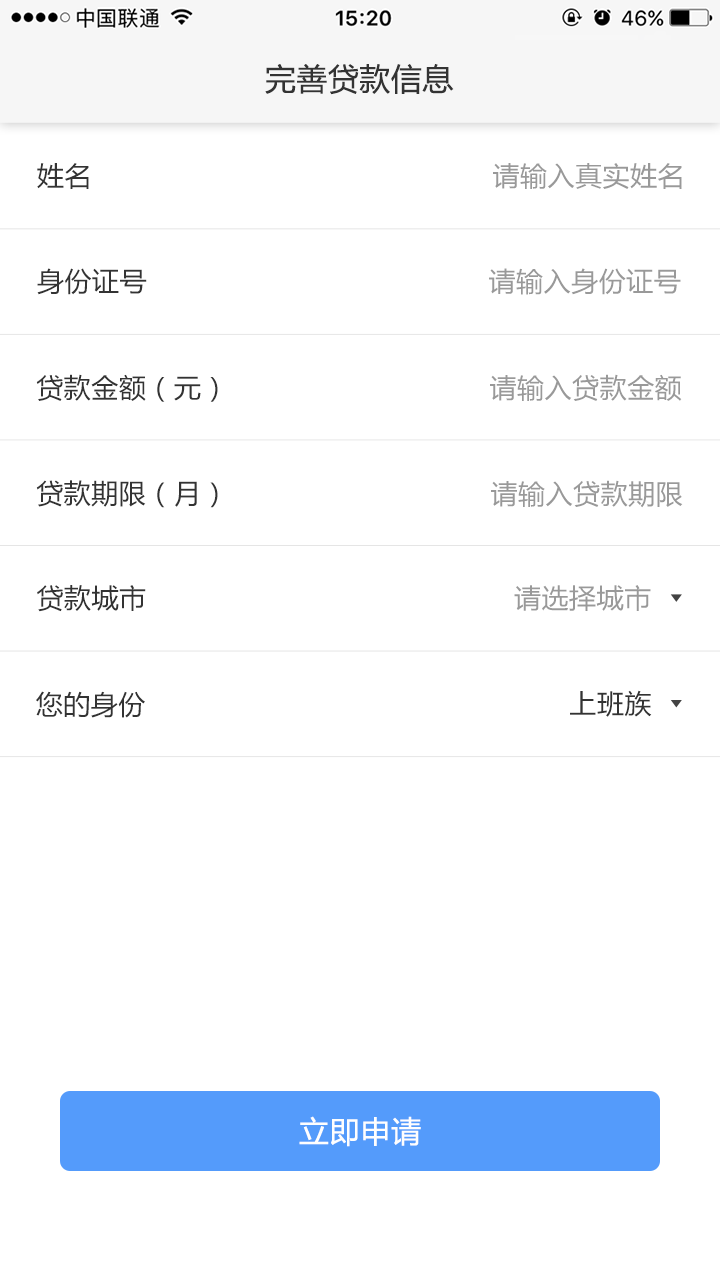
<style>
.page{position:relative;width:720px;height:1280px;background:#ffffff}
.page>*{position:absolute;margin:0}
.t1{font:30.7px "MicrosoftYaHei";letter-spacing:0.025em;color:#333333}
.t2{font:26.9px "MicrosoftYaHei";letter-spacing:0.025em;color:#333333}
.t3{font:26.9px "MicrosoftYaHei";letter-spacing:0.025em;color:#999999}
.t4{font:30px "MicrosoftYaHei";letter-spacing:0.025em;color:#fefefe}
</style>
<div class="page">
<p class="t1" style="left:265px;top:64px;width:189px;height:31px">完善贷款信息</p>
<p class="t2" style="left:37px;top:163px;width:52px;height:26px">姓名</p>
<p class="t3" style="left:493px;top:163px;width:189px;height:26px">请输入真实姓名</p>
<p class="t2" style="left:37px;top:268px;width:110px;height:27px">身份证号</p>
<p class="t3" style="left:489px;top:268px;width:192px;height:27px">请输入身份证号</p>
<p class="t2" style="left:36px;top:374px;width:182px;height:28px">贷款金额（元）</p>
<p class="t3" style="left:490px;top:374px;width:192px;height:27px">请输入贷款金额</p>
<p class="t2" style="left:36px;top:480px;width:182px;height:28px">贷款期限（月）</p>
<p class="t3" style="left:491px;top:480px;width:192px;height:28px">请输入贷款期限</p>
<p class="t2" style="left:37px;top:585px;width:109px;height:27px">贷款城市</p>
<p class="t3" style="left:514px;top:585px;width:137px;height:26px">请选择城市</p>
<p class="t2" style="left:36px;top:691px;width:109px;height:27px">您的身份</p>
<p class="t2" style="left:570px;top:690px;width:82px;height:27px">上班族</p>
<p class="t4" style="left:299px;top:1116px;width:122px;height:31px">立即申请</p>
</div>
